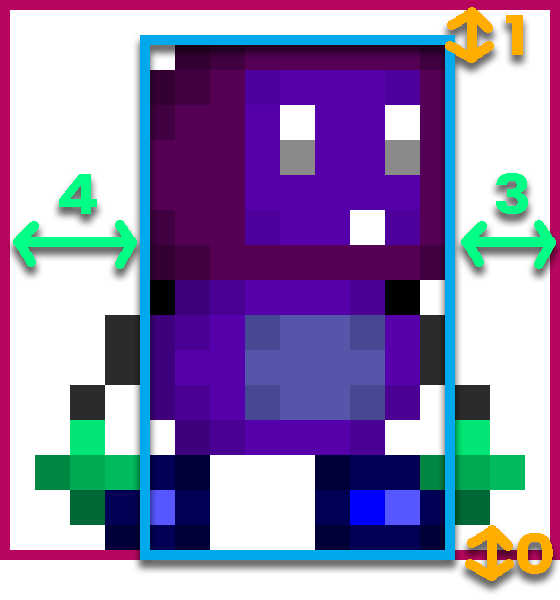
<style>
.page{position:relative;width:560px;height:600px;background:#ffffff}
.page>*{position:absolute;margin:0}
.t1{font:55.2px "Poppins-Bold";letter-spacing:-0.04em;color:#ffae00;scale:1.16 1}
.t2{font:55.2px "Poppins-Bold";letter-spacing:-0.04em;color:#00ff84;scale:1.16 1}
</style>
<div class="page">
<p class="t1" style="left:506px;top:15px;width:17px;height:40px">1</p>
<p class="t2" style="left:59px;top:174px;width:38px;height:40px">4</p>
<p class="t2" style="left:496px;top:173px;width:32px;height:41px">3</p>
<p class="t1" style="left:517px;top:533px;width:36px;height:41px">0</p>
</div>
